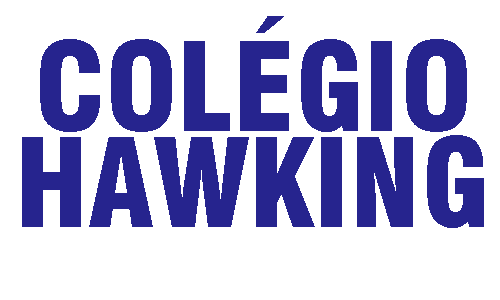
<style>
.page{position:relative;width:500px;height:300px;background:#ffffff}
.page>*{position:absolute;margin:0}
.t1{font:120.1px/48px "Swiss721BT-BlackCondensed";color:#26248e}
</style>
<div class="page">
<p class="t1" style="left:22px;top:16px;width:462px;height:212px;text-align:center">COLÉGIO<br><br>HAWKING</p>
</div>
